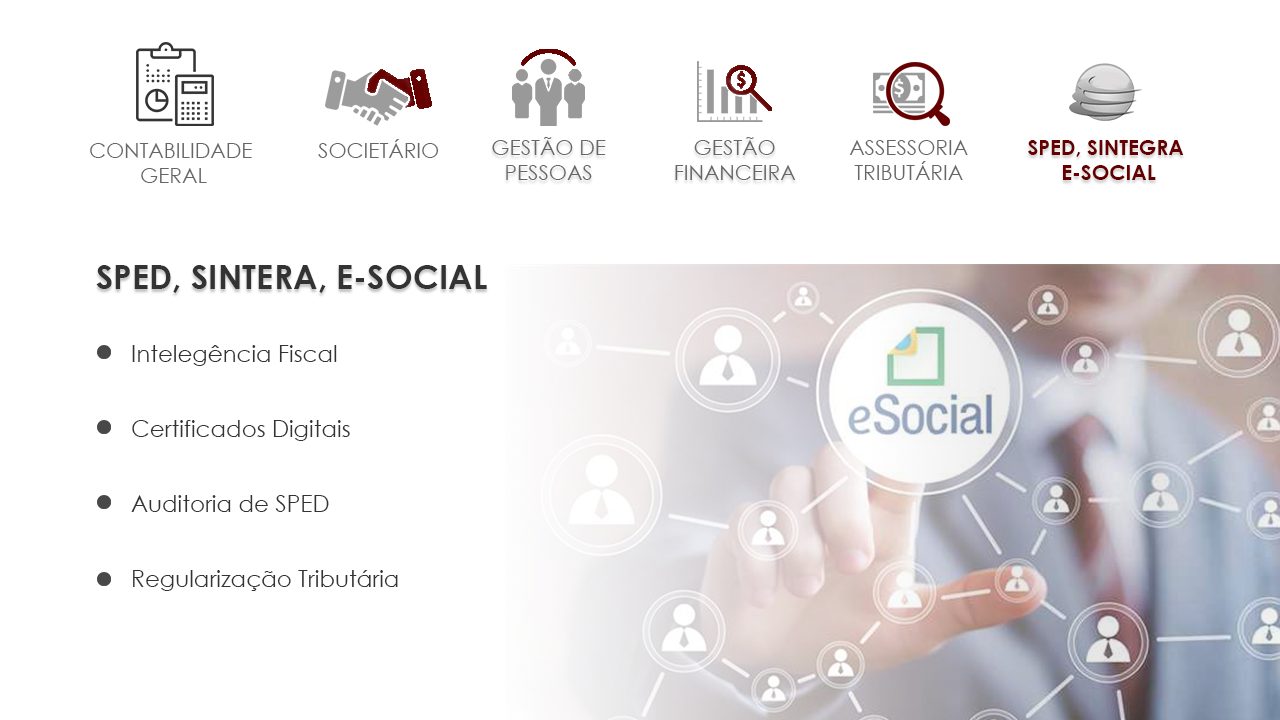
<style>
.page{position:relative;width:1280px;height:720px;background:#ffffff}
.page>*{position:absolute;margin:0}
.t1{font:20.8px/25px "CenturyGothic";color:#666666}
.t2{font:20.8px "CenturyGothic";color:#666666}
.t3{font:20.8px/25px "CenturyGothic-Bold";color:#660000}
.t4{font:33.3px "CenturyGothic-Bold";color:#333333}
.t5{font:22.9px/25px "CenturyGothic";color:#333333}
</style>
<div class="page">
<p class="t1" style="left:492px;top:137px;width:114px;height:43px;text-align:center">GESTÃO DE <br>PESSOAS</p>
<p class="t1" style="left:675px;top:137px;width:121px;height:43px;text-align:center">GESTÃO<br>FINANCEIRA</p>
<p class="t1" style="left:90px;top:143px;width:162px;height:40px;text-align:center">CONTABILIDADE<br> GERAL</p>
<p class="t2" style="left:318px;top:139px;width:121px;height:19px">SOCIETÁRIO</p>
<p class="t1" style="left:849px;top:140px;width:119px;height:40px;text-align:center">ASSESSORIA<br>TRIBUTÁRIA</p>
<p class="t3" style="left:1028px;top:140px;width:156px;height:40px;text-align:center">SPED, SINTEGRA<br> E-SOCIAL</p>
<p class="t4" style="left:96px;top:265px;width:391px;height:28px">SPED, SINTERA, E-SOCIAL</p>
<p class="t5" style="left:131px;top:345px;width:267px;height:246px">Intelegência Fiscal<br><br><br>Certificados Digitais<br><br><br>Auditoria de SPED<br><br><br>Regularização Tributária</p>
</div>
